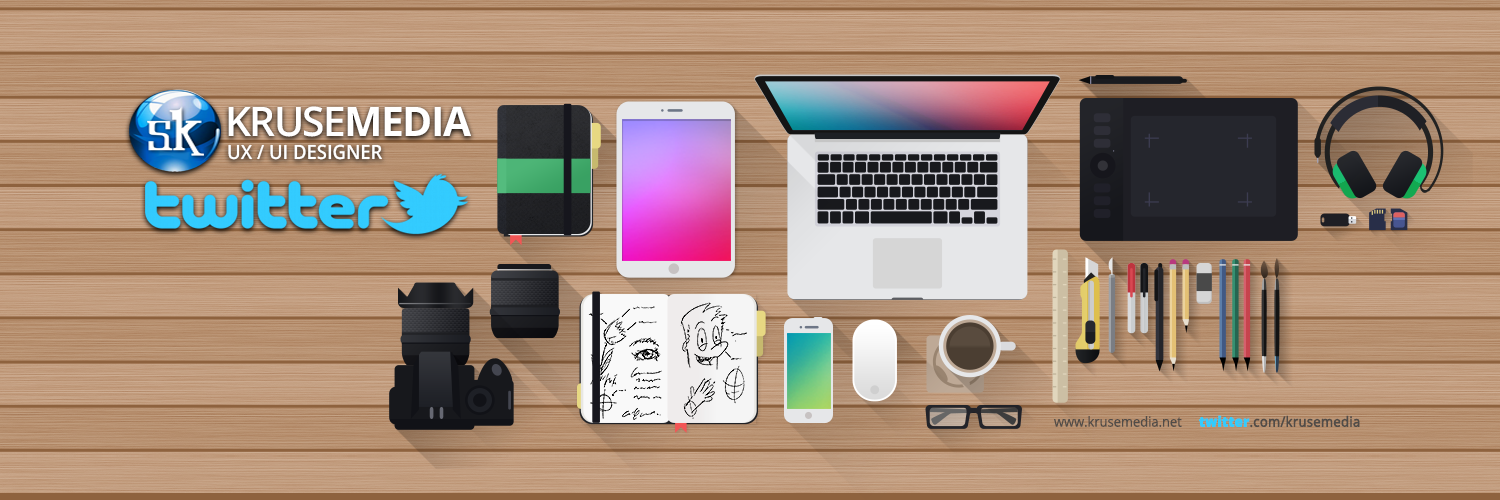
<style>
.page{position:relative;width:1500px;height:500px}
.page>*{position:absolute;margin:0}
.t1{font:40.8px "OpenSans-Semibold";letter-spacing:-0.04em;color:#ffffff}
.t2{font:40.8px "OpenSans-Bold";letter-spacing:-0.04em;color:#ffffff}
.t3{font:19.8px "OpenSans-Semibold";color:#ffffff;text-transform:uppercase;scale:0.93 1}
.t4{font:14px "OpenSans";color:#514c48;scale:0.92 1}
.t5{font:14px "OpenSans";color:#514c48;font-weight:bold;scale:0.93 1}
.t6{font:14px "OpenSans-Extrabold";color:#33ccfe;font-weight:bold;scale:0.93 1}
</style>
<div class="page">
<p class="t1" style="left:228px;top:106px;width:243px;height:31px">KRUSE<span class="t2">MEDIA</span></p>
<p class="t3" style="left:228px;top:144px;width:154px;height:16px">UX / UI DESIGNER</p>
<p class="t4" style="left:1054px;top:416px;width:128px;height:11px">www.krusemedia.net</p>
<p class="t5" style="left:1199px;top:415px;width:161px;height:13px"><span class="t6">twitter</span>.com/krusemedia</p>
</div>
